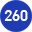
<style>
.page{position:relative;width:32px;height:32px;background:#1f3bb3}
.page>*{position:absolute;margin:0}
.t1{font:15.5px "DIN-Medium";letter-spacing:-0.02em;color:#fffeff}
</style>
<div class="page">
<p class="t1" style="left:4px;top:10px;width:24px;height:11px">260</p>
</div>
